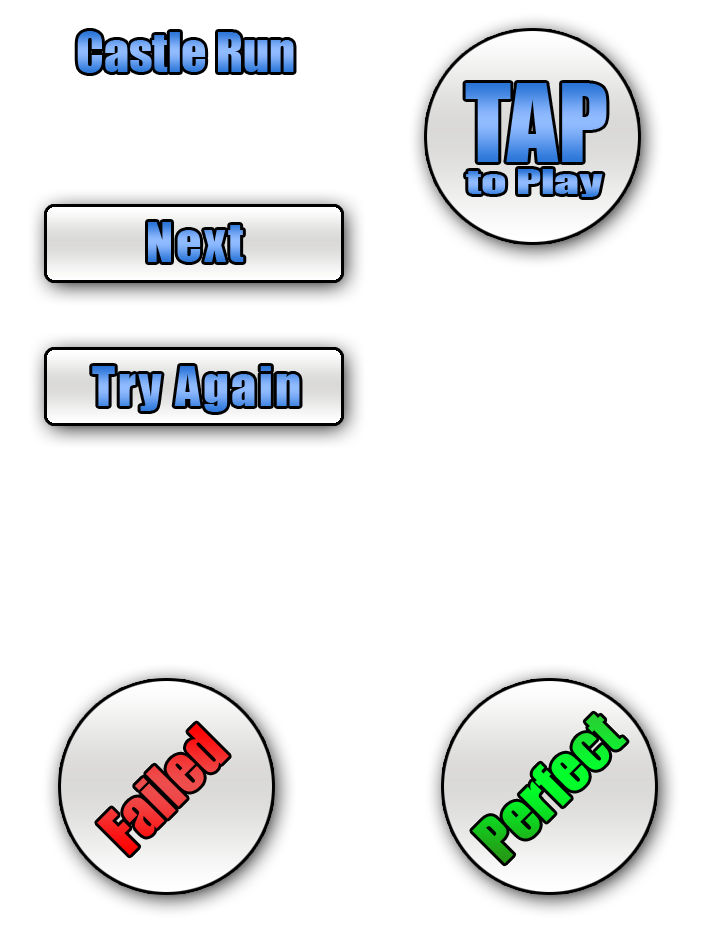
<style>
.page{position:relative;width:709px;height:945px;background:#ffffff}
.page>*{position:absolute;margin:0}
.t1{font:50px "Impact"}
.t2{font:100px "Impact"}
.t3{font:31.2px "Impact";scale:1.6 1}
.t4{font:50px "Impact";letter-spacing:0.05em}
.t5{font:58.3px "Impact"}
</style>
<div class="page">
<p class="t1" style="left:77px;top:31px;width:217px;height:42px">Castle Run</p>
<p class="t2" style="left:465px;top:83px;width:142px;height:79px">TAP</p>
<p class="t3" style="left:466px;top:169px;width:137px;height:28px">to Play</p>
<p class="t4" style="left:148px;top:222px;width:96px;height:40px">Next</p>
<p class="t4" style="left:92px;top:366px;width:208px;height:46px">Try Again</p>
<p class="t5" style="left:472px;top:713px;width:155px;height:151px;rotate:-45deg">Perfect</p>
<p class="t5" style="left:97px;top:723px;width:132px;height:133px;rotate:-45deg">Failed</p>
</div>
